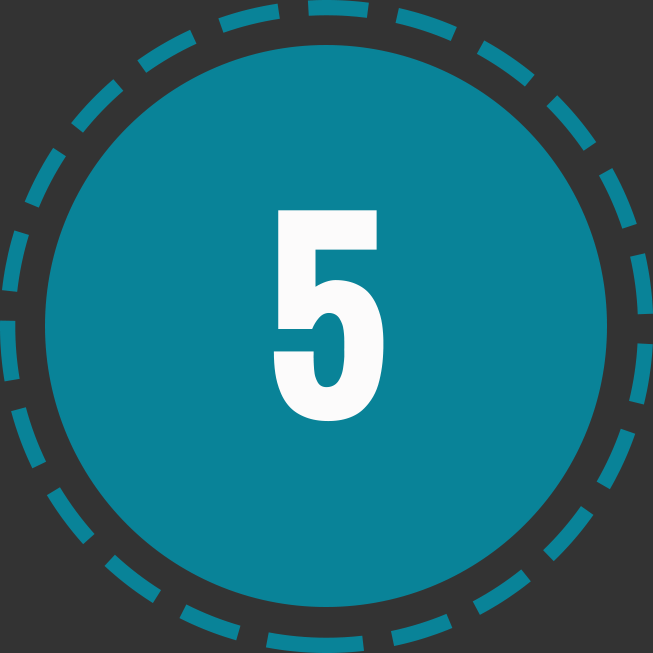
<style>
.page{position:relative;width:653px;height:653px;background:#098398}
.page>*{position:absolute;margin:0}
.t1{font:234.9px "Oswald-Bold";color:#fcfbfb}
</style>
<div class="page">
<p class="t1" style="left:273px;top:210px;width:111px;height:212px">5</p>
</div>
